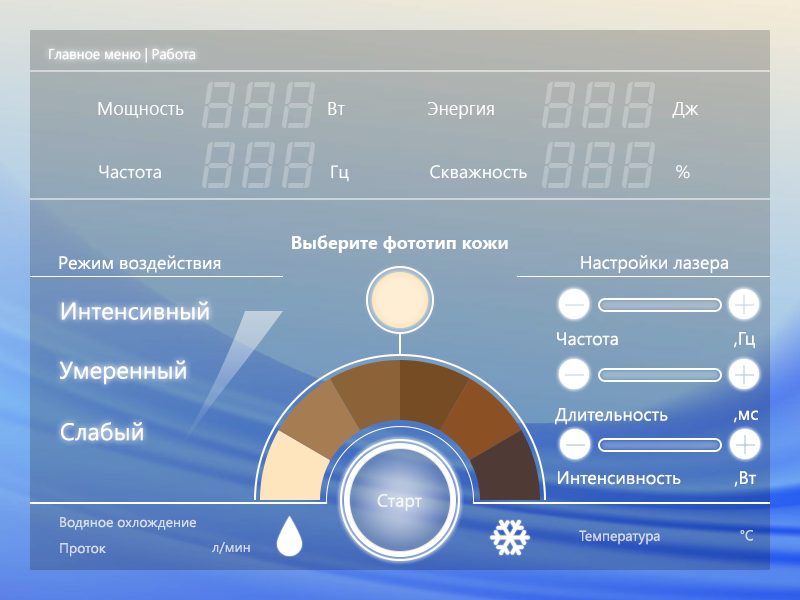
<style>
.page{position:relative;width:800px;height:600px}
.page>*{position:absolute;margin:0}
.t1{font:14.2px "SegoeUI";color:#ffffff}
.t2{font:18.5px "SegoeUI";color:#ffffff;scale:0.97 1}
.t3{font:18.1px "SegoeUI";color:#ffffff}
.t4{font:18px "SegoeUI-Bold";color:#ffffff}
.t5{font:18px "SegoeUI";color:#ffffff}
.t6{font:24px "SegoeUI";color:#ffffff}
.t7{font:17.8px "SegoeUI";color:#ffffff}
.t8{font:14px "SegoeUI";color:#d6dded}
.t9{font:14.5px "SegoeUI";color:#d3daed;scale:0.96 1}
.t10{font:14px "SegoeUI";color:#d5dcec}
.t11{font:14px "SegoeUI";color:#d4dbec}
</style>
<div class="page">
<p class="t1" style="left:49px;top:47px;width:147px;height:16px">Главное меню | Работа</p>
<p class="t2" style="left:98px;top:102px;width:247px;height:16px">Мощность                             Вт</p>
<p class="t2" style="left:428px;top:102px;width:271px;height:17px">Энергия                                    Дж</p>
<p class="t3" style="left:99px;top:165px;width:250px;height:17px">Частота                                  Гц</p>
<p class="t3" style="left:430px;top:165px;width:260px;height:14px">Скважность                              %</p>
<p class="t4" style="left:292px;top:235px;width:216px;height:18px">Выберите фототип кожи</p>
<p class="t5" style="left:59px;top:255px;width:162px;height:18px">Режим воздействия</p>
<p class="t5" style="left:581px;top:255px;width:147px;height:18px">Настройки лазера</p>
<p class="t6" style="left:61px;top:301px;width:148px;height:19px">Интенсивный</p>
<p class="t5" style="left:557px;top:332px;width:61px;height:14px">Частота</p>
<p class="t5" style="left:734px;top:332px;width:21px;height:16px">,Гц</p>
<p class="t6" style="left:59px;top:360px;width:127px;height:25px">Умеренный</p>
<p class="t5" style="left:555px;top:408px;width:113px;height:17px">Длительность</p>
<p class="t5" style="left:734px;top:410px;width:24px;height:13px">,мс</p>
<p class="t6" style="left:61px;top:422px;width:82px;height:19px">Слабый</p>
<p class="t5" style="left:558px;top:471px;width:123px;height:14px">Интенсивность</p>
<p class="t5" style="left:734px;top:471px;width:22px;height:16px">,Вт</p>
<p class="t7" style="left:377px;top:494px;width:45px;height:17px">Старт</p>
<p class="t8" style="left:60px;top:517px;width:136px;height:13px">Водяное охлождение</p>
<p class="t9" style="left:579px;top:530px;width:81px;height:15px">Температура</p>
<p class="t9" style="left:740px;top:530px;width:13px;height:11px">°C</p>
<p class="t10" style="left:60px;top:543px;width:46px;height:14px">Проток</p>
<p class="t11" style="left:212px;top:542px;width:38px;height:12px">л/мин</p>
</div>
